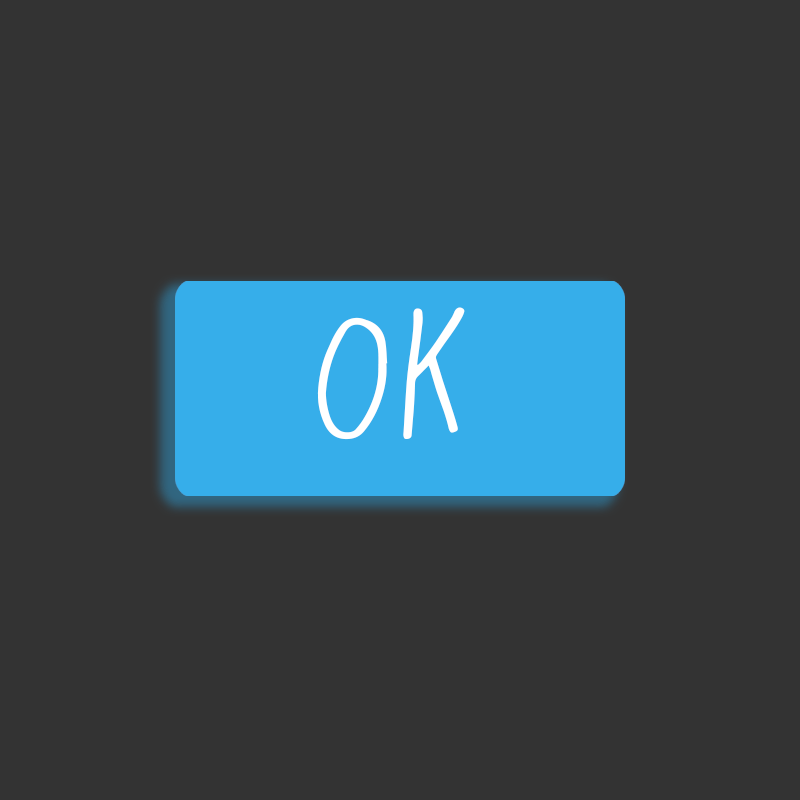
<style>
.page{position:relative;width:800px;height:800px;background:#333333}
.page>*{position:absolute;margin:0}
.t1{font:190.5px "Blackberries";color:#ffffff}
</style>
<div class="page">
<p class="t1" style="left:317px;top:307px;width:148px;height:133px">OK</p>
</div>
